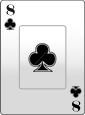
<style>
.page{position:relative;width:85px;height:115px;background:#dadada}
.page>*{position:absolute;margin:0}
.t1{font:15.4px "EngraversMT-Bold";letter-spacing:0.075em;color:#161616;scale:0.78 1}
.t2{font:15.4px "EngraversMT-Bold";letter-spacing:0.075em;color:#000000;scale:0.78 1}
</style>
<div class="page">
<p class="t1" style="left:6px;top:4px;width:9px;height:12px">8</p>
<p class="t2" style="left:72px;top:100px;width:9px;height:12px;rotate:180deg">8</p>
</div>
